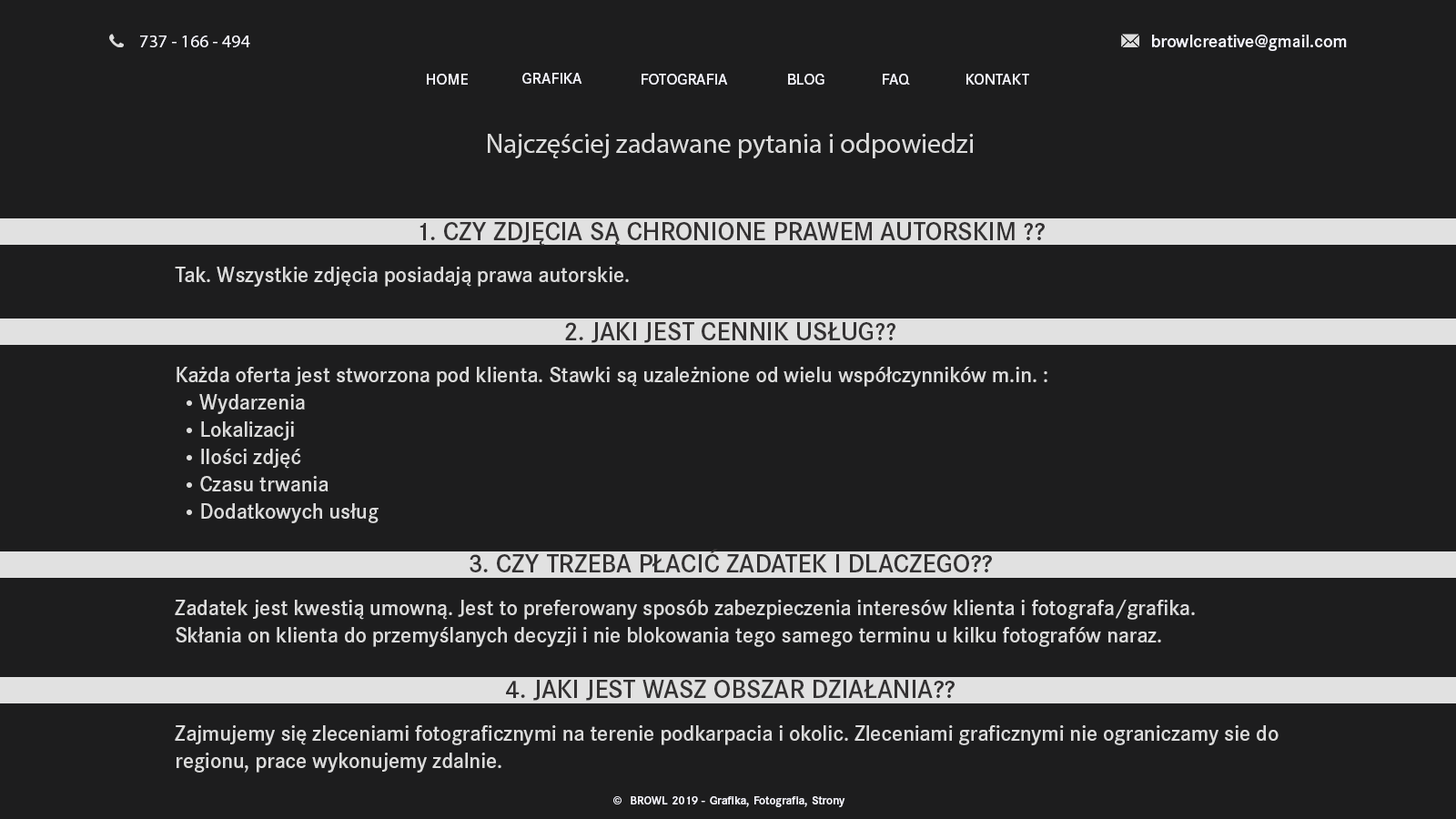
<style>
.page{position:relative;width:1456px;height:819px;background:#1d1d1e}
.page>*{position:absolute;margin:0}
.t1{font:18.2px "MyriadPro-Regular";color:#f7f7ff}
.t2{font:18.2px "CorporateSPro-Demi";color:#f7f7ff}
.t3{font:16.2px "CorporateSPro-Demi";color:#f7f7ff}
.t4{font:27.3px "MyriadPro-Regular";color:#dcdcdc}
.t5{font:26.5px "CorporateSPro-Demi";color:#333132;text-transform:uppercase}
.t6{font:21.8px "CorporateSPro-Demi";color:#dcdcdc}
.t7{font:21.8px/27.3px "CorporateSPro-Demi";color:#dcdcdc}
.t8{font:21.8px/27.3px "BDColonius";color:#dcdcdc}
.t9{font:12px "CorporateSPro-Demi";color:#f7f7ff}
</style>
<div class="page">
<p class="t1" style="left:140px;top:35px;width:110px;height:12px">737 - 166 - 494</p>
<p class="t2" style="left:1152px;top:35px;width:195px;height:16px">browlcreative@gmail.com</p>
<p class="t3" style="left:427px;top:74px;width:41px;height:11px;text-align:justify">HOME<br>v</p>
<p class="t3" style="left:522px;top:73px;width:60px;height:11px">GRAFIKA</p>
<p class="t3" style="left:642px;top:74px;width:86px;height:11px">FOTOGRAFIA</p>
<p class="t3" style="left:788px;top:74px;width:36px;height:11px">BLOG</p>
<p class="t3" style="left:883px;top:74px;width:27px;height:11px">FAQ</p>
<p class="t3" style="left:966px;top:74px;width:63px;height:11px">KONTAKT</p>
<p class="t4" style="left:488px;top:133px;width:485px;height:26px">Najczęściej zadawane pytania i odpowiedzi</p>
<p class="t5" style="left:420px;top:222px;width:625px;height:24px">1. Czy zdjęcia są chronione prawem autorskim ??</p>
<p class="t6" style="left:175px;top:267px;width:454px;height:20px">Tak. Wszystkie zdjęcia posiadają prawa autorskie.</p>
<p class="t5" style="left:565px;top:322px;width:330px;height:21px">2. Jaki jest cennik usług??</p>
<p class="t7" style="left:177px;top:367px;width:870px;height:156px">Każda oferta jest stworzona pod klienta. Stawki są uzależnione od wielu współczynników m.in. :  <br>  <span class="t8">•  </span>Wydarzenia<br>  <span class="t8">•  </span>Lokalizacji<br>  <span class="t8">•  </span>Ilości zdjęć <br>  <span class="t8">•  </span>Czasu trwania<br>  <span class="t8">•  </span>Dodatkowych usług</p>
<p class="t5" style="left:470px;top:549px;width:522px;height:23px">3. Czy trzeba płacić zadatek i dlaczego??</p>
<p class="t7" style="left:175px;top:600px;width:1020px;height:47px">Zadatek jest kwestią umowną. Jest to preferowany sposób zabezpieczenia interesów klienta i fotografa/grafika. <br>Skłania on klienta do przemyślanych decyzji i nie blokowania tego samego terminu u kilku fotografów naraz.</p>
<p class="t5" style="left:506px;top:680px;width:449px;height:21px">4. Jaki jest Wasz obszar działania??</p>
<p class="t7" style="left:175px;top:725px;width:1104px;height:48px">Zajmujemy się zleceniami fotograficznymi na terenie podkarpacia i okolic. Zleceniami graficznymi nie ograniczamy sie do regionu, prace wykonujemy zdalnie.</p>
<p class="t9" style="left:613px;top:796px;width:232px;height:11px;text-align:justify">©  BROWL 2019 - Grafika, Fotografia, Strony www<br>v</p>
</div>
